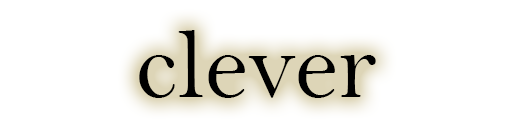
<style>
.page{position:relative;width:512px;height:128px;background:#ffffff}
.page>*{position:absolute;margin:0}
.t1{font:100px "BellMT";color:#000000}
</style>
<div class="page">
<p class="t1" style="left:139px;top:30px;width:237px;height:68px">clever</p>
</div>
